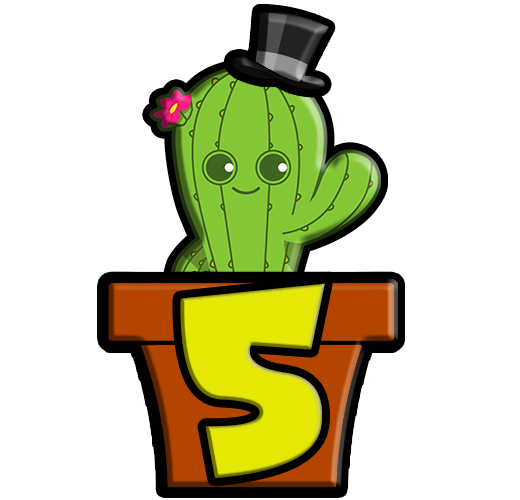
<style>
.page{position:relative;width:520px;height:500px;background:#ffffff}
.page>*{position:absolute;margin:0}
.t1{font:234.6px "Funhouse";color:#e5e805}
</style>
<div class="page">
<p class="t1" style="left:180px;top:283px;width:145px;height:195px">5</p>
</div>
